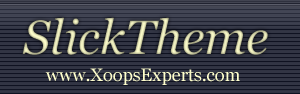
<style>
.page{position:relative;width:300px;height:94px}
.page>*{position:absolute;margin:0}
.t1{font:48px "Georgia-Italic"}
.t2{font:18px "Georgia";color:#ffffcc}
</style>
<div class="page">
<p class="t1" style="left:22px;top:17px;width:246px;height:38px">SlickTheme</p>
<p class="t2" style="left:45px;top:68px;width:195px;height:17px">www.XoopsExperts.com</p>
</div>
